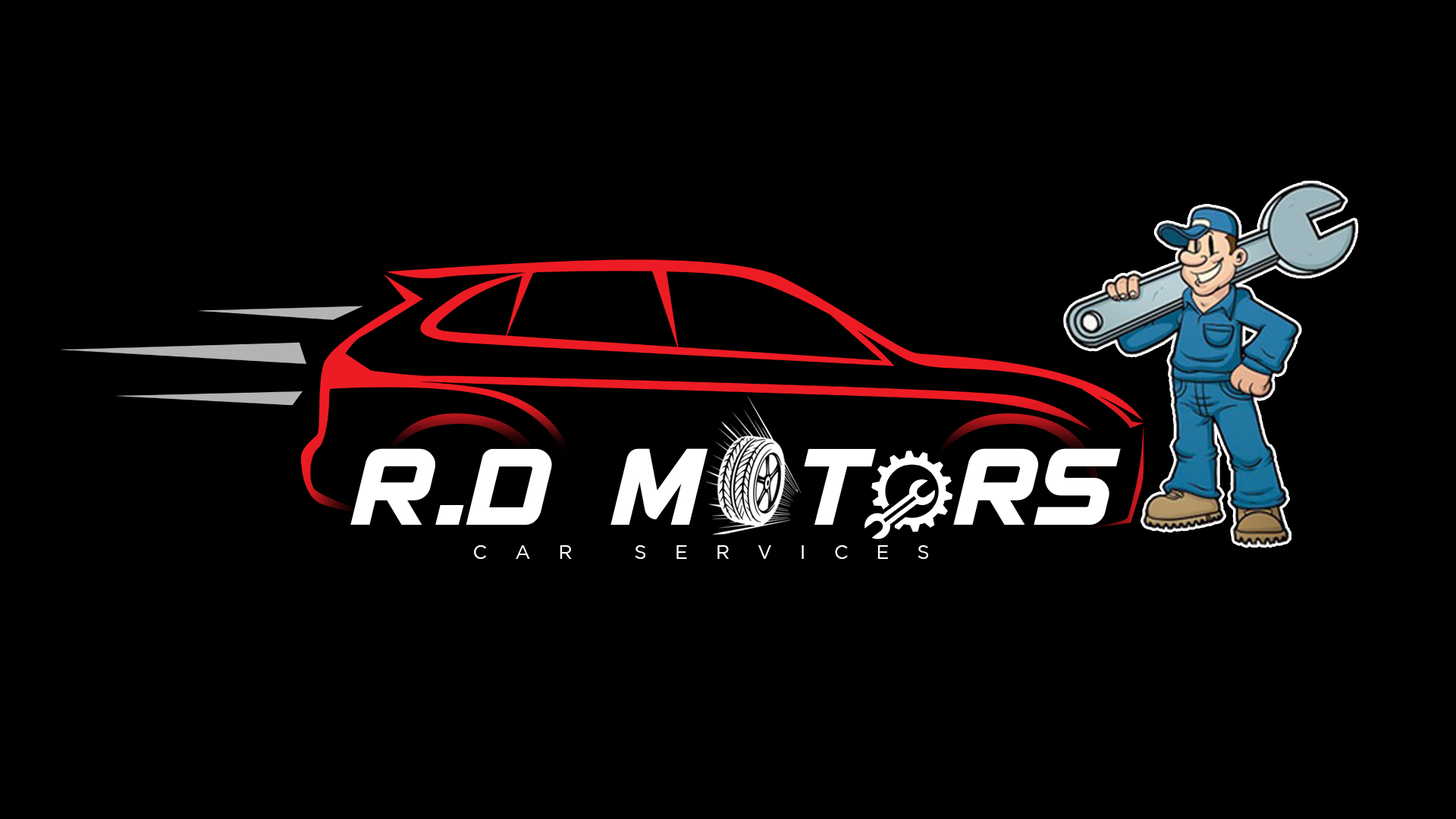
<style>
.page{position:relative;width:1456px;height:819px;background:#000000}
.page>*{position:absolute;margin:0}
.t1{font:115.6px "Spantaran";letter-spacing:0.02em;color:#ffffff}
.t2{font:18.7px "Gotham-Book";letter-spacing:1.52em;color:#ffffff;text-transform:uppercase}
</style>
<div class="page">
<p class="t1" style="left:350px;top:448px;width:771px;height:77px">R.D  MOTORS</p>
<p class="t2" style="left:474px;top:545px;width:454px;height:14px">car services</p>
</div>
